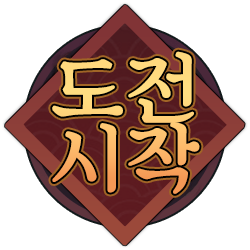
<style>
.page{position:relative;width:250px;height:250px;background:#ffffff}
.page>*{position:absolute;margin:0}
.t1{font:80px/70px "SDKukdetopokki-aLt";letter-spacing:0.02em}
</style>
<div class="page">
<p class="t1" style="left:52px;top:51px;width:148px;height:143px;text-align:center">도전<br>시작</p>
</div>
